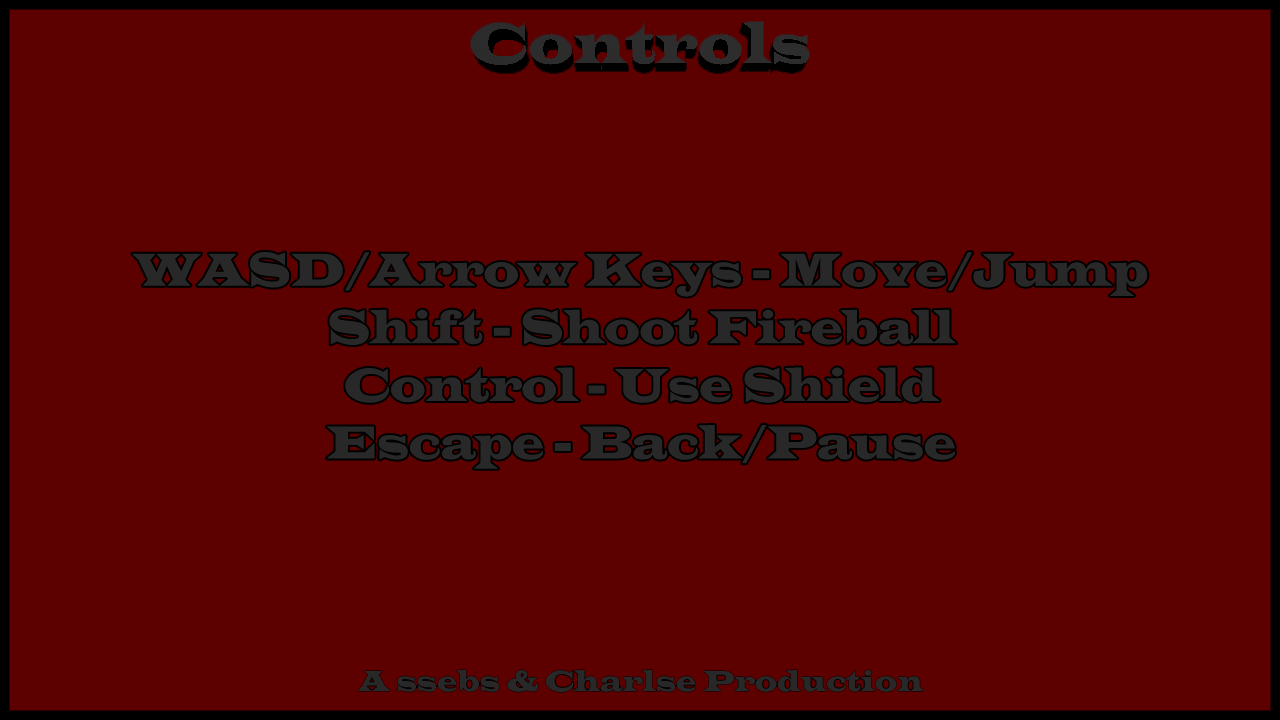
<style>
.page{position:relative;width:1280px;height:720px;background:#5d0000}
.page>*{position:absolute;margin:0}
.t1{font:48px "LatinWide";color:#282828;scale:0.75 1}
</style>
<div class="page">
<p class="t1" style="left:132px;top:252px;width:1016px;height:217px;text-align:center">WASD/Arrow Keys - Move/Jump<br>Shift - Shoot Fireball<br>Control - Use Shield<br>Escape - Back/Pause</p>
</div>
